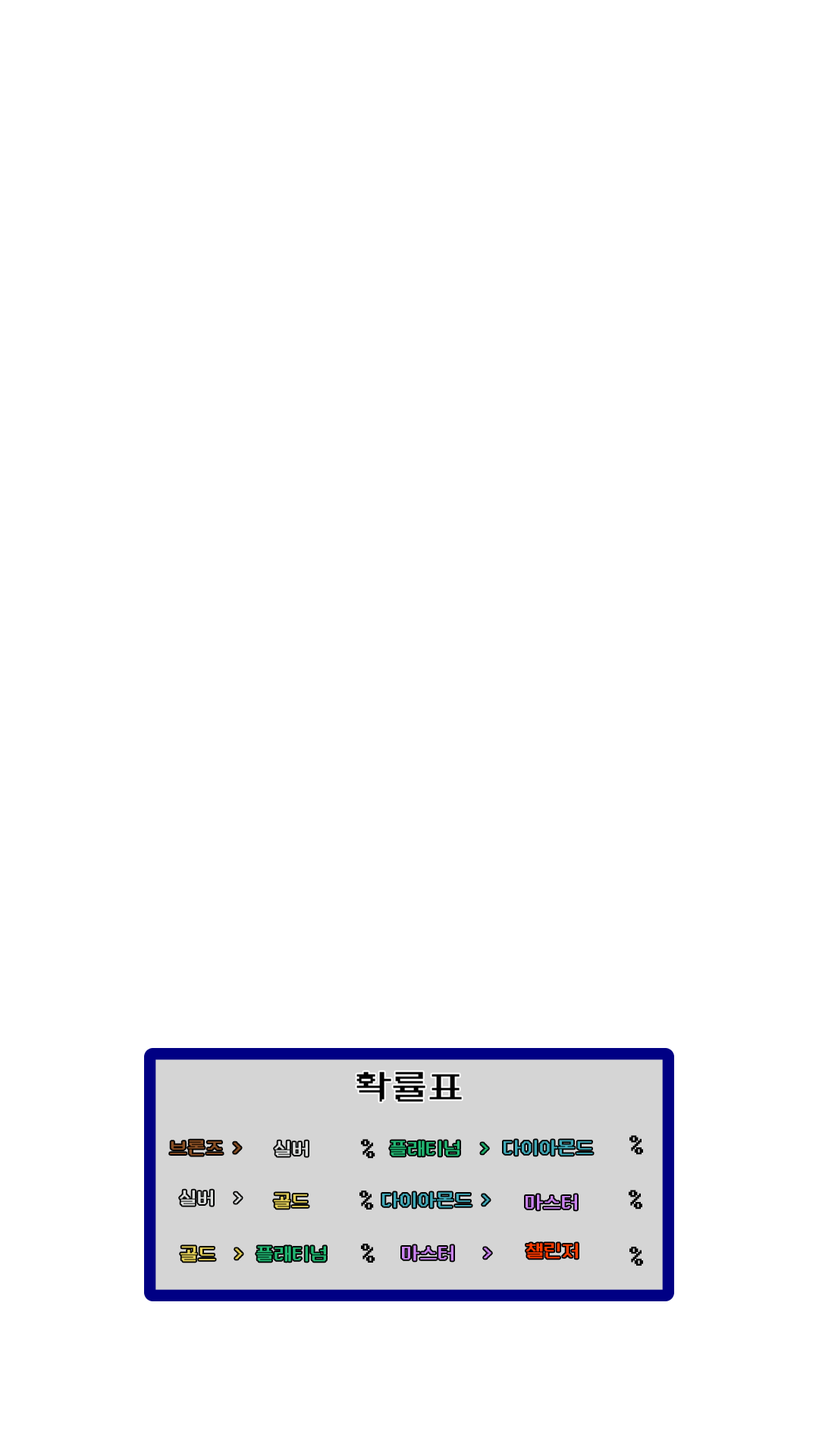
<style>
.page{position:relative;width:819px;height:1456px;background:#ffffff}
.page>*{position:absolute;margin:0}
.t1{font:36.4px "DungGeunMo";color:#000000}
.t2{font:18.2px "DungGeunMo";color:#dfe1e0}
.t3{font:27.2px "DungGeunMo";color:#000000}
.t4{font:18.2px "DungGeunMo";color:#22b672}
.t5{font:18.2px "DungGeunMo";color:#41aab9}
.t6{font:18.2px "DungGeunMo";color:#e3cf59}
.t7{font:18.2px "DungGeunMo";color:#cb84f1}
.t8{font:18.2px "DungGeunMo";color:#ff3d00}
</style>
<div class="page">
<p class="t1" style="left:356px;top:1072px;width:106px;height:30px">확률표</p>
<p class="t2" style="left:275px;top:1141px;width:33px;height:15px">실버</p>
<p class="t3" style="left:361px;top:1139px;width:14px;height:20px">%</p>
<p class="t4" style="left:390px;top:1141px;width:98px;height:15px">플래티넘  &gt;</p>
<p class="t5" style="left:504px;top:1140px;width:89px;height:16px">다이아몬드</p>
<p class="t3" style="left:629px;top:1135px;width:14px;height:20px">%</p>
<p class="t2" style="left:180px;top:1190px;width:62px;height:16px">실버  &gt;</p>
<p class="t6" style="left:274px;top:1193px;width:35px;height:16px">골드</p>
<p class="t3" style="left:359px;top:1191px;width:15px;height:19px">%</p>
<p class="t5" style="left:382px;top:1192px;width:108px;height:16px">다이아몬드 &gt;</p>
<p class="t3" style="left:629px;top:1190px;width:13px;height:20px">%</p>
<p class="t7" style="left:526px;top:1194px;width:51px;height:16px">마스터</p>
<p class="t6" style="left:180px;top:1246px;width:63px;height:16px">골드  &gt;</p>
<p class="t4" style="left:256px;top:1246px;width:70px;height:16px">플래티넘</p>
<p class="t3" style="left:361px;top:1244px;width:14px;height:19px">%</p>
<p class="t7" style="left:402px;top:1245px;width:89px;height:16px">마스터   &gt;</p>
<p class="t8" style="left:526px;top:1243px;width:52px;height:16px">챌린저</p>
<p class="t3" style="left:629px;top:1247px;width:14px;height:19px">%</p>
</div>
